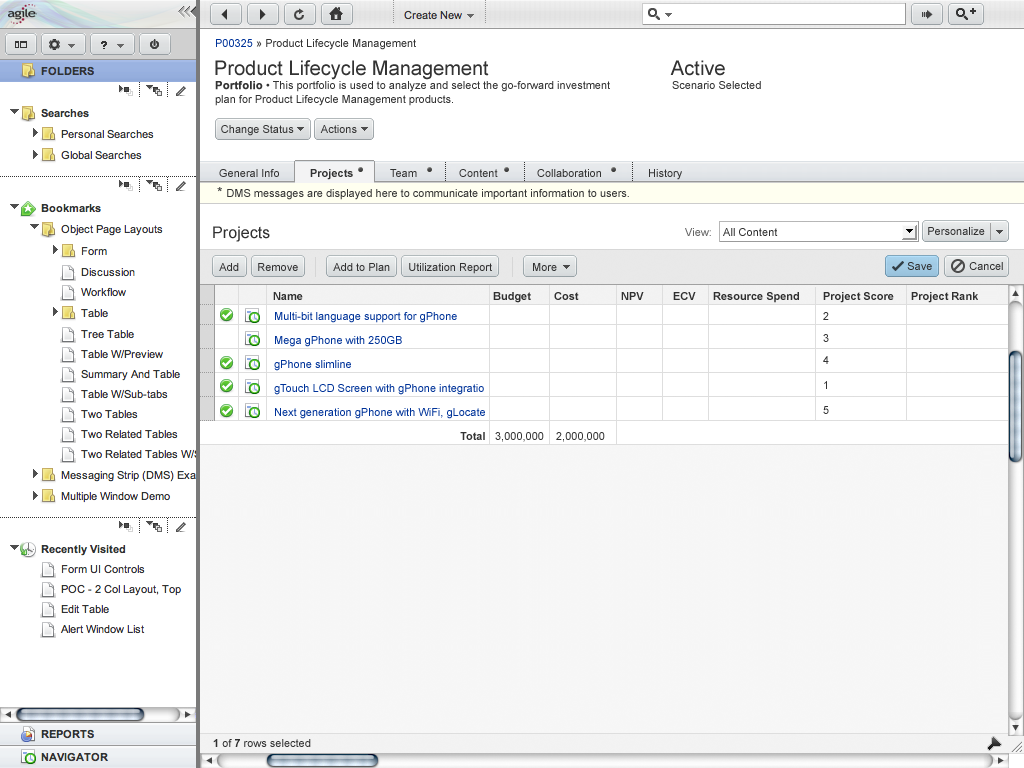
<style>
.page{position:relative;width:1024px;height:768px;background:#ffffff}
.page>*{position:absolute;margin:0}
.t1{font:11px "ArialMT";color:#333333}
.t2{font:11px "ArialMT";color:#003399}
.t3{font:20px "ArialMT";color:#333333}
.t4{font:11px/14px "ArialMT";color:#333333}
.t5{font:11px/14px "Arial-BoldMT";color:#333333;font-weight:bold}
.t6{font:11px "Arial-BoldMT";color:#333333}
.t7{font:14px "ArialMT";color:#333333}
.t8{font:16px "ArialMT";letter-spacing:0.005em;color:#303030}
.t9{font:11px "ArialMT";letter-spacing:0.005em;color:#666666}
.t10{font:11px "ArialMT";letter-spacing:0.005em;color:#303030}
.t11{font:11px "ArialMT";color:#303030}
.t12{font:11px "Arial-BoldMT";color:#303030}
.t13{font:11px/20px "Arial-BoldMT";color:#303030}
.t14{font:11px/20px "ArialMT";color:#333333}
.t15{font:11px/22px "ArialMT";color:#333333}
.t16{font:11px/25px "ArialMT";color:#333333}
.t17{font:11px/24px "ArialMT";color:#003399}
.t18{font:11px/20px "ArialMT";color:#003399}
.t19{font:11px/24px "Arial-BoldMT";color:#333333}
</style>
<div class="page">
<p class="t1" style="left:216px;top:39px;width:200px;height:11px"><span class="t2">P00325</span> » Product Lifecycle Management</p>
<p class="t3" style="left:215px;top:60px;width:274px;height:20px">Product Lifecycle Management</p>
<p class="t3" style="left:670px;top:60px;width:55px;height:16px">Active</p>
<p class="t4" style="left:215px;top:81px;width:395px;height:25px"><span class="t5">Portfolio</span> • This portfolio is used to analyze and select the go-forward investment<br>plan for Product Lifecycle Management products.</p>
<p class="t1" style="left:672px;top:81px;width:89px;height:8px">Scenario Selected</p>
<p class="t1" style="left:221px;top:125px;width:73px;height:11px">Change Status</p>
<p class="t1" style="left:320px;top:125px;width:37px;height:8px">Actions</p>
<p class="t1" style="left:219px;top:169px;width:60px;height:8px">General Info</p>
<p class="t6" style="left:310px;top:169px;width:43px;height:11px">Projects</p>
<p class="t1" style="left:390px;top:169px;width:27px;height:8px">Team</p>
<p class="t1" style="left:459px;top:169px;width:39px;height:8px">Content</p>
<p class="t1" style="left:537px;top:169px;width:64px;height:8px">Collaboration</p>
<p class="t1" style="left:649px;top:169px;width:33px;height:11px">History</p>
<p class="t1" style="left:217px;top:187px;width:412px;height:13px"><span class="t7">* </span>DMS messages are displayed here to communicate important information to users.</p>
<p class="t8" style="left:213px;top:226px;width:57px;height:16px">Projects</p>
<p class="t9" style="left:685px;top:228px;width:26px;height:8px">View:</p>
<p class="t10" style="left:723px;top:228px;width:55px;height:8px">All Content</p>
<p class="t11" style="left:928px;top:227px;width:57px;height:8px">Personalize</p>
<p class="t11" style="left:219px;top:263px;width:20px;height:8px">Add</p>
<p class="t11" style="left:258px;top:263px;width:40px;height:8px">Remove</p>
<p class="t11" style="left:333px;top:263px;width:57px;height:8px">Add to Plan</p>
<p class="t11" style="left:409px;top:263px;width:83px;height:11px">Utilization Report</p>
<p class="t11" style="left:533px;top:263px;width:24px;height:8px">More</p>
<p class="t11" style="left:907px;top:262px;width:25px;height:8px">Save</p>
<p class="t11" style="left:969px;top:262px;width:34px;height:8px">Cancel</p>
<p class="t12" style="left:273px;top:292px;width:30px;height:8px">Name</p>
<p class="t12" style="left:493px;top:292px;width:38px;height:11px">Budget</p>
<p class="t12" style="left:554px;top:292px;width:25px;height:8px">Cost</p>
<p class="t12" style="left:621px;top:292px;width:23px;height:8px">NPV</p>
<p class="t12" style="left:673px;top:292px;width:23px;height:8px">ECV</p>
<p class="t12" style="left:713px;top:292px;width:86px;height:11px">Resource Spend</p>
<p class="t13" style="left:823px;top:292px;width:71px;height:122px">Project Score<br><span class="t14">2<br></span><span class="t15">3<br>4<br></span><span class="t16">1<br>5</span></p>
<p class="t12" style="left:911px;top:292px;width:67px;height:11px">Project Rank</p>
<p class="t17" style="left:274px;top:312px;width:211px;height:128px"><span class="t18">Multi-bit language support for gPhone<br></span>Mega gPhone with 250GB<br>gPhone slimline<br>gTouch LCD Screen with gPhone integratio<br>Next generation gPhone with WiFi, gLocate <br>       <span class="t19">Total</span></p>
<p class="t1" style="left:495px;top:432px;width:49px;height:10px">3,000,000</p>
<p class="t1" style="left:556px;top:432px;width:49px;height:10px">2,000,000</p>
<p class="t11" style="left:213px;top:739px;width:98px;height:8px"><span class="t12">1</span> of <span class="t12">7</span> rows selected</p>
</div>
